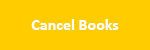
<style>
.page{position:relative;width:150px;height:50px;background:#ffcc00}
.page>*{position:absolute;margin:0}
.t1{font:16px "Calibri-Bold";color:#ffffff}
</style>
<div class="page">
<p class="t1" style="left:31px;top:19px;width:88px;height:11px">Cancel Books</p>
</div>
